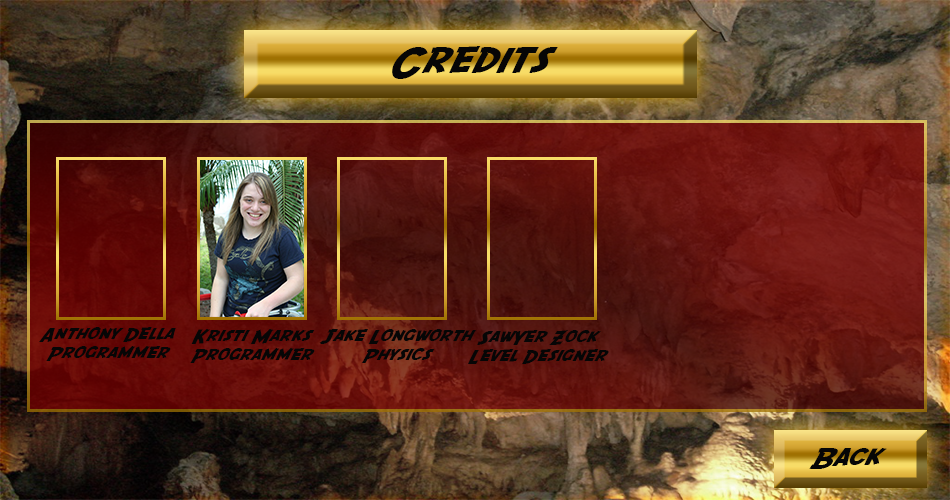
<style>
.page{position:relative;width:950px;height:500px}
.page>*{position:absolute;margin:0}
.t1{font:36px "SFFedora";letter-spacing:-0.005em;color:#060606;scale:1.2 1}
.t2{font:16px "SFFedora";letter-spacing:-0.005em;color:#060606;scale:1.2 1}
.t3{font:24px "SFFedora";letter-spacing:-0.005em;color:#060606;scale:1.2 1}
</style>
<div class="page">
<p class="t1" style="left:392px;top:46px;width:166px;height:33px">Credits</p>
<p class="t2" style="left:39px;top:327px;width:137px;height:34px;text-align:center">Anthony Della<br>Programmer</p>
<p class="t2" style="left:190px;top:329px;width:125px;height:34px;text-align:center">Kristi Marks<br>Programmer</p>
<p class="t2" style="left:319px;top:329px;width:157px;height:34px;text-align:center">Jake Longworth<br>Physics</p>
<p class="t2" style="left:468px;top:330px;width:141px;height:34px;text-align:center">SawYer Zock<br>Level Designer</p>
<p class="t3" style="left:809px;top:448px;width:78px;height:21px">Back</p>
</div>
